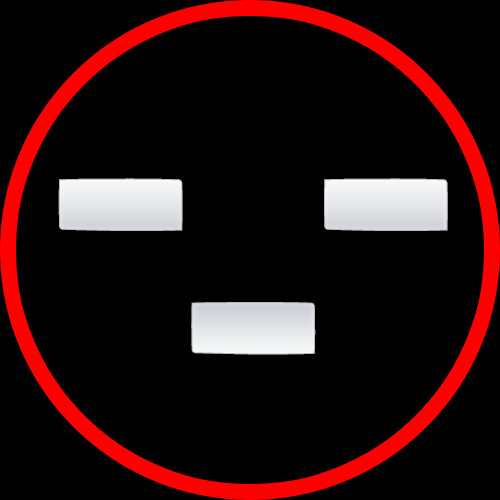
<style>
.page{position:relative;width:500px;height:500px;background:#000000}
.page>*{position:absolute;margin:0}
.t1{font:329.1px "Digitalt";color:#e3e5e8;text-transform:uppercase}
</style>
<div class="page">
<p class="t1" style="left:58px;top:178px;width:390px;height:177px">-_-</p>
</div>
